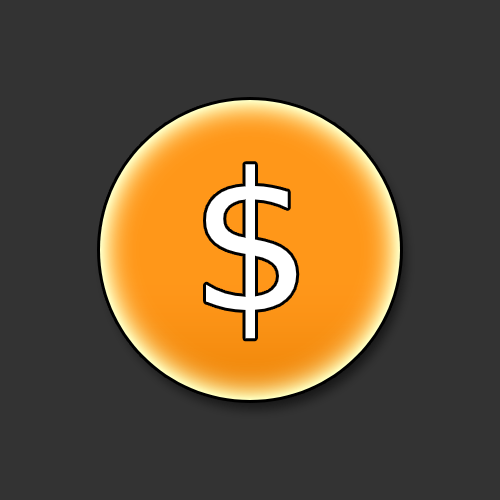
<style>
.page{position:relative;width:500px;height:500px;background:#333333}
.page>*{position:absolute;margin:0}
.t1{font:192px "DejaVuSans";color:#ffffff}
</style>
<div class="page">
<p class="t1" style="left:206px;top:164px;width:91px;height:175px">$</p>
</div>
